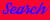
<style>
.page{position:relative;width:50px;height:20px;background:#fb042d}
.page>*{position:absolute;margin:0}
.t1{font:12px "Streetwear";color:#2501fe}
</style>
<div class="page">
<p class="t1" style="left:2px;top:2px;width:48px;height:13px">Search</p>
</div>
